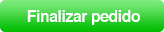
<style>
.page{position:relative;width:164px;height:32px}
.page>*{position:absolute;margin:0}
.t1{font:15.7px "Helvetica-Bold";letter-spacing:-0.025em;color:#ffffff}
</style>
<div class="page">
<p class="t1" style="left:27px;top:10px;width:113px;height:15px">Finalizar pedido</p>
</div>
